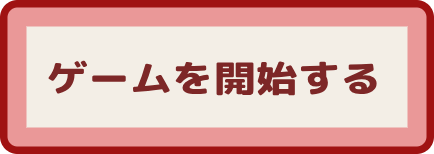
<style>
.page{position:relative;width:434px;height:154px;background:#f3eee6}
.page>*{position:absolute;margin:0}
.t1{font:37.2px "rounded-l-mplus-2p-heavy";color:#7d2727;scale:1.13 1}
.t2{font:21.2px "rounded-l-mplus-2p-heavy";color:#000000;scale:1.13 1}
</style>
<div class="page">
<p class="t1" style="left:48px;top:60px;width:329px;height:36px"><span class="t2">　</span>ゲームを開始する</p>
</div>
